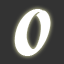
<style>
.page{position:relative;width:64px;height:64px;background:#333333}
.page>*{position:absolute;margin:0}
.t1{font:72px "ForteMT";color:#ffffff}
</style>
<div class="page">
<p class="t1" style="left:14px;top:9px;width:37px;height:47px">0</p>
</div>
